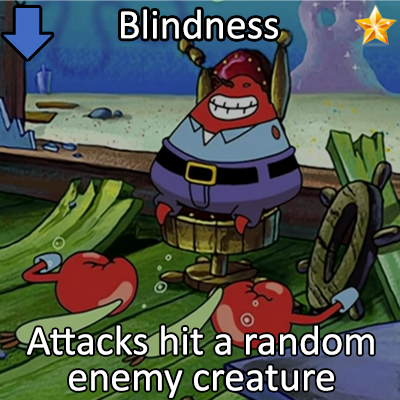
<style>
.page{position:relative;width:400px;height:400px}
.page>*{position:absolute;margin:0}
.t1{font:72px "Calibri";color:#ffffff}
.t2{font:72px/36px "Calibri";color:#ffffff}
</style>
<div class="page">
<p class="t1" style="left:121px;top:9px;width:157px;height:30px">Blindness</p>
<p class="t2" style="left:27px;top:325px;width:347px;height:73px;text-align:center">Attacks hit a random<br>enemy creature</p>
</div>
